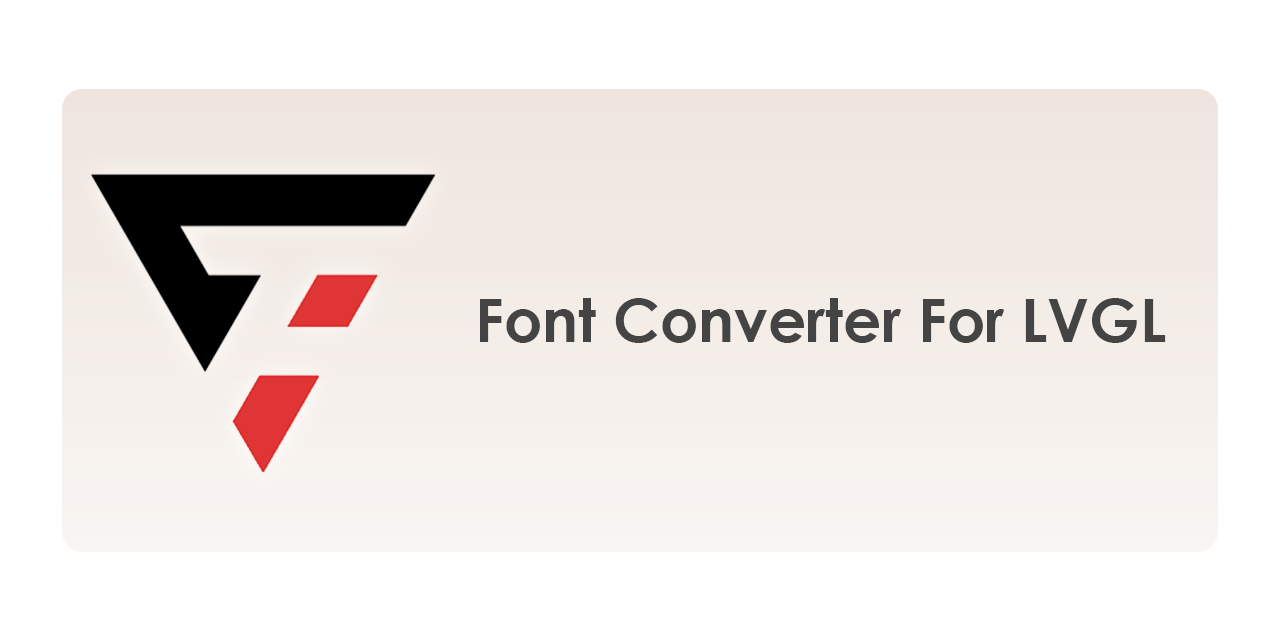
<style>
.page{position:relative;width:1280px;height:640px;background:#ffffff}
.page>*{position:absolute;margin:0}
.t1{font:60px "CenturyGothic-Bold";color:#444444}
</style>
<div class="page">
<p class="t1" style="left:480px;top:298px;width:686px;height:45px">Font Converter For LVGL</p>
</div>
